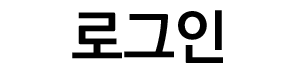
<style>
.page{position:relative;width:300px;height:75px;background:#ffffff}
.page>*{position:absolute;margin:0}
.t1{font:60px "KoPubDotumBold";color:#000000}
</style>
<div class="page">
<p class="t1" style="left:72px;top:10px;width:151px;height:53px">로그인</p>
</div>
